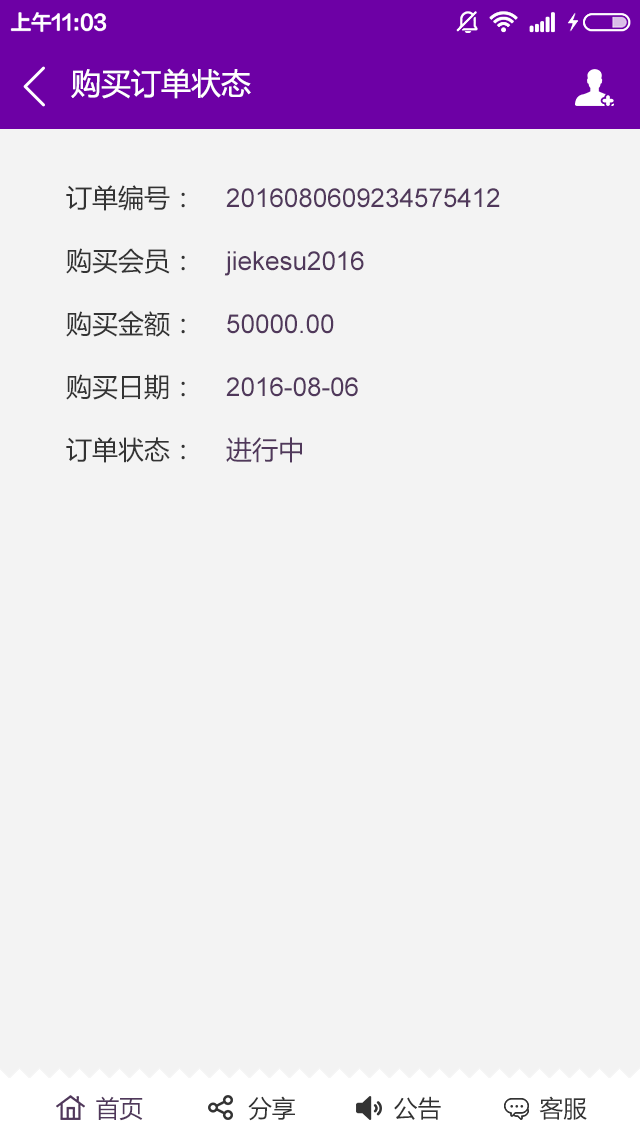
<style>
.page{position:relative;width:640px;height:1136px;background:#f3f3f3}
.page>*{position:absolute;margin:0}
.t1{font:30px "MicrosoftYaHei";color:#ffffff}
.t2{font:26px/63px "MicrosoftYaHei";color:#333333}
.t3{font:26px/63px "ArialMT";color:#50385b}
.t4{font:26px/63px "MicrosoftYaHei";color:#50385b}
.t5{font:24px "MicrosoftYaHei";color:#333333}
.t6{font:24px "MicrosoftYaHei";color:#50385b}
</style>
<div class="page">
<p class="t1" style="left:71px;top:68px;width:180px;height:31px">购买订单状态</p>
<p class="t2" style="left:66px;top:185px;width:119px;height:278px">订单编号：<br>购买会员：<br>购买金额：<br>购买日期：<br>订单状态：</p>
<p class="t3" style="left:224px;top:188px;width:276px;height:275px">2016080609234575412<br>jiekesu2016<br>50000.00<br>2016-08-06<br><span class="t4">进行中</span></p>
<p class="t5" style="left:96px;top:1096px;width:491px;height:25px"><span class="t6">首页</span>               分享              公告              客服</p>
</div>
